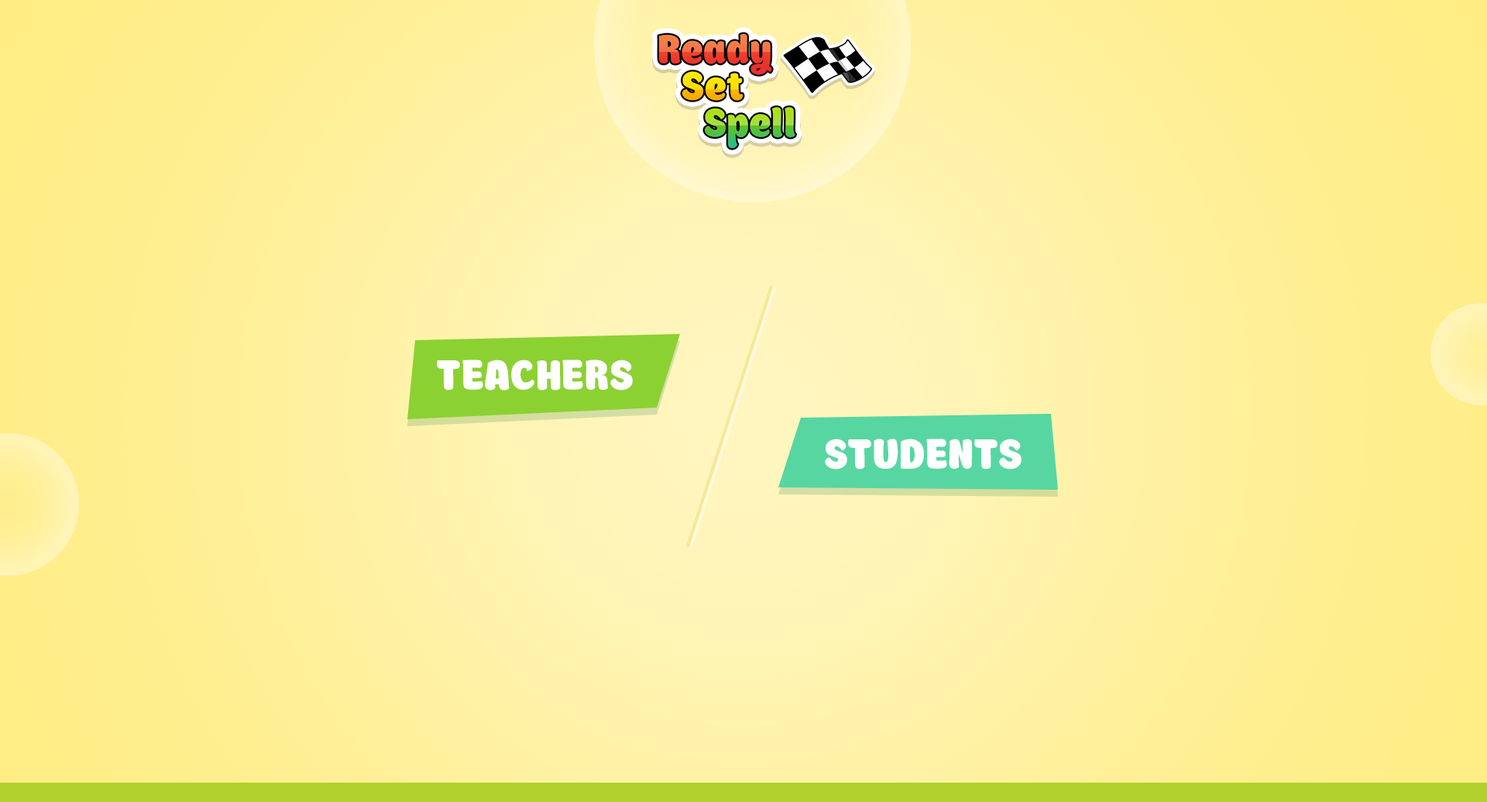
<style>
.page{position:relative;width:1487px;height:802px}
.page>*{position:absolute;margin:0}
.t1{font:46.5px "Boomboom";letter-spacing:0.01em;color:#ffffff}
</style>
<div class="page">
<p class="t1" style="left:437px;top:359px;width:196px;height:31px">TEACHERS</p>
<p class="t1" style="left:825px;top:438px;width:197px;height:31px">STUDENTS</p>
</div>
